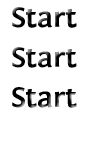
<style>
.page{position:relative;width:90px;height:160px;background:#ffffff}
.page>*{position:absolute;margin:0}
.t1{font:30px "FontinSans-Bold";color:#000000}
</style>
<div class="page">
<p class="t1" style="left:12px;top:7px;width:65px;height:21px">Start</p>
<p class="t1" style="left:12px;top:47px;width:65px;height:21px">Start</p>
<p class="t1" style="left:12px;top:87px;width:65px;height:21px">Start</p>
</div>
